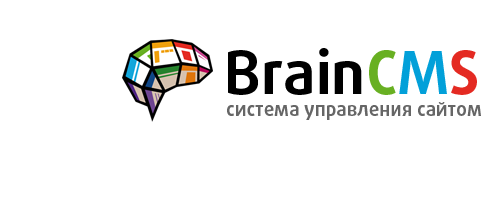
<style>
.page{position:relative;width:500px;height:200px;background:#ffffff}
.page>*{position:absolute;margin:0}
.t1{font:60px "DaxlinePro-Bold";color:#000000}
.t2{font:60px "DaxlinePro-Bold";color:#68b022}
.t3{font:60px "DaxlinePro-Bold";color:#02a0d9}
.t4{font:60px "DaxlinePro-Bold";color:#e42a22}
.t5{font:19px "DaxlinePro-Bold";color:#666666}
</style>
<div class="page">
<p class="t1" style="left:228px;top:48px;width:249px;height:47px">Brain<span class="t2">C</span><span class="t3">M</span><span class="t4">S</span></p>
<p class="t5" style="left:227px;top:102px;width:254px;height:18px">система управления сайтом</p>
</div>
